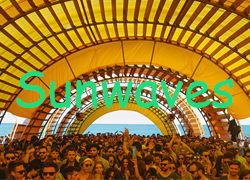
<style>
.page{position:relative;width:250px;height:180px}
.page>*{position:absolute;margin:0}
.t1{font:50px "ComicSansMS";color:#1edc7c}
</style>
<div class="page">
<p class="t1" style="left:16px;top:71px;width:218px;height:37px">Sunwaves</p>
</div>
